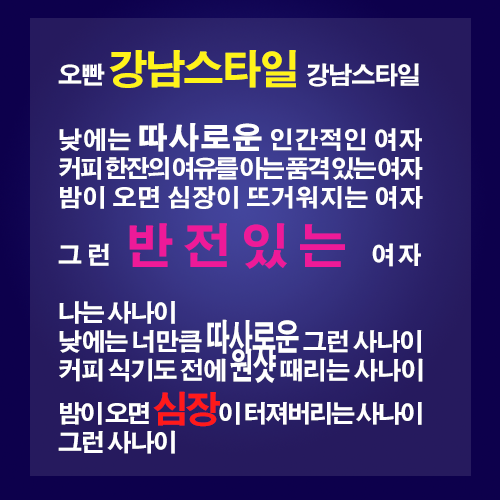
<style>
.page{position:relative;width:500px;height:500px}
.page>*{position:absolute;margin:0}
.t1{font:24px "AdobeGothicStd-Bold";letter-spacing:-0.1em;color:#ffffff}
.t2{font:24px "AdobeGothicStd-Bold";letter-spacing:-0.05em;color:#ffffff}
.t3{font:40px "AdobeGothicStd-Bold";letter-spacing:-0.05em;color:#fff200}
.t4{font:24px "AdobeGothicStd-Bold";letter-spacing:0.025em;color:#ffffff}
.t5{font:30px "AdobeGothicStd-Bold";letter-spacing:0.025em;color:#ffffff;font-weight:bold}
.t6{font:24px "AdobeGothicStd-Bold";letter-spacing:0.02em;color:#ffffff}
.t7{font:24px "AdobeGothicStd-Bold";letter-spacing:0.2em;color:#ffffff}
.t8{font:48px "AdobeGothicStd-Bold";letter-spacing:0.2em;color:#ec008c}
.t9{font:24px "AdobeGothicStd-Bold";letter-spacing:0.1em;color:#ffffff}
.t10{font:24px "AdobeGothicStd-Bold";letter-spacing:-0.035em;color:#ffffff}
.t11{font:36px "AdobeGothicStd-Bold";letter-spacing:-0.035em;color:#ffffff;scale:0.67 1}
.t12{font:36px "AdobeGothicStd-Bold";letter-spacing:-0.05em;color:#ffffff;scale:0.67 1}
.t13{font:24px "AdobeGothicStd-Bold";letter-spacing:-0.025em;color:#ffffff}
.t14{font:24px "AdobeGothicStd-Bold";letter-spacing:-0.085em;color:#ffffff}
.t15{font:36px "AdobeGothicStd-Bold";letter-spacing:-0.085em;color:#ff0000}
</style>
<div class="page">
<p class="t1" style="left:58px;top:50px;width:365px;height:404px"><span class="t2">오빤 </span><span class="t3">강남스타일</span><span class="t2">  강남스타일 <br><br></span><span class="t4">낮에는 </span><span class="t5">따사로운</span><span class="t4"> 인간적인 여자 <br></span>커피 한잔의 여유를 아는 품격 있는 여자 <br><span class="t6">밤이 오면 심장이 뜨거워지는 여자 <br></span><span class="t7">그런 </span><span class="t8">반전있는 </span><span class="t9">여</span><span class="t7">자<br></span><span class="t2"><br>나는 사나이 <br></span><span class="t10">낮에는 너만큼 </span><span class="t11">따사로운</span><span class="t10"> 그런 사나이 <br></span><span class="t2">커피 식기도 전에 </span><span class="t12">원샷 </span><span class="t13">때리는 사나이 <br></span><span class="t14">밤이 오면 </span><span class="t15">심장</span><span class="t14">이 터져버리는 사나이 <br></span><span class="t2">그런 사나이</span></p>
</div>
